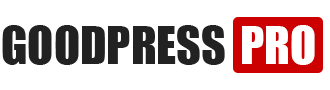
<style>
.page{position:relative;width:330px;height:90px;background:#ffffff}
.page>*{position:absolute;margin:0}
.t1{font:48px "Impact";color:#222222}
.t2{font:48px "Impact";color:#ffffff}
</style>
<div class="page">
<p class="t1" style="left:2px;top:25px;width:223px;height:40px">GOODPRESS</p>
<p class="t2" style="left:242px;top:25px;width:73px;height:40px">PRO</p>
</div>
